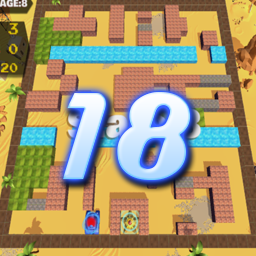
<style>
.page{position:relative;width:256px;height:256px}
.page>*{position:absolute;margin:0}
.t1{font:124.7px "Magneto-Bold";letter-spacing:0.02em;scale:0.91 1}
</style>
<div class="page">
<p class="t1" style="left:62px;top:92px;width:129px;height:88px">18</p>
</div>
